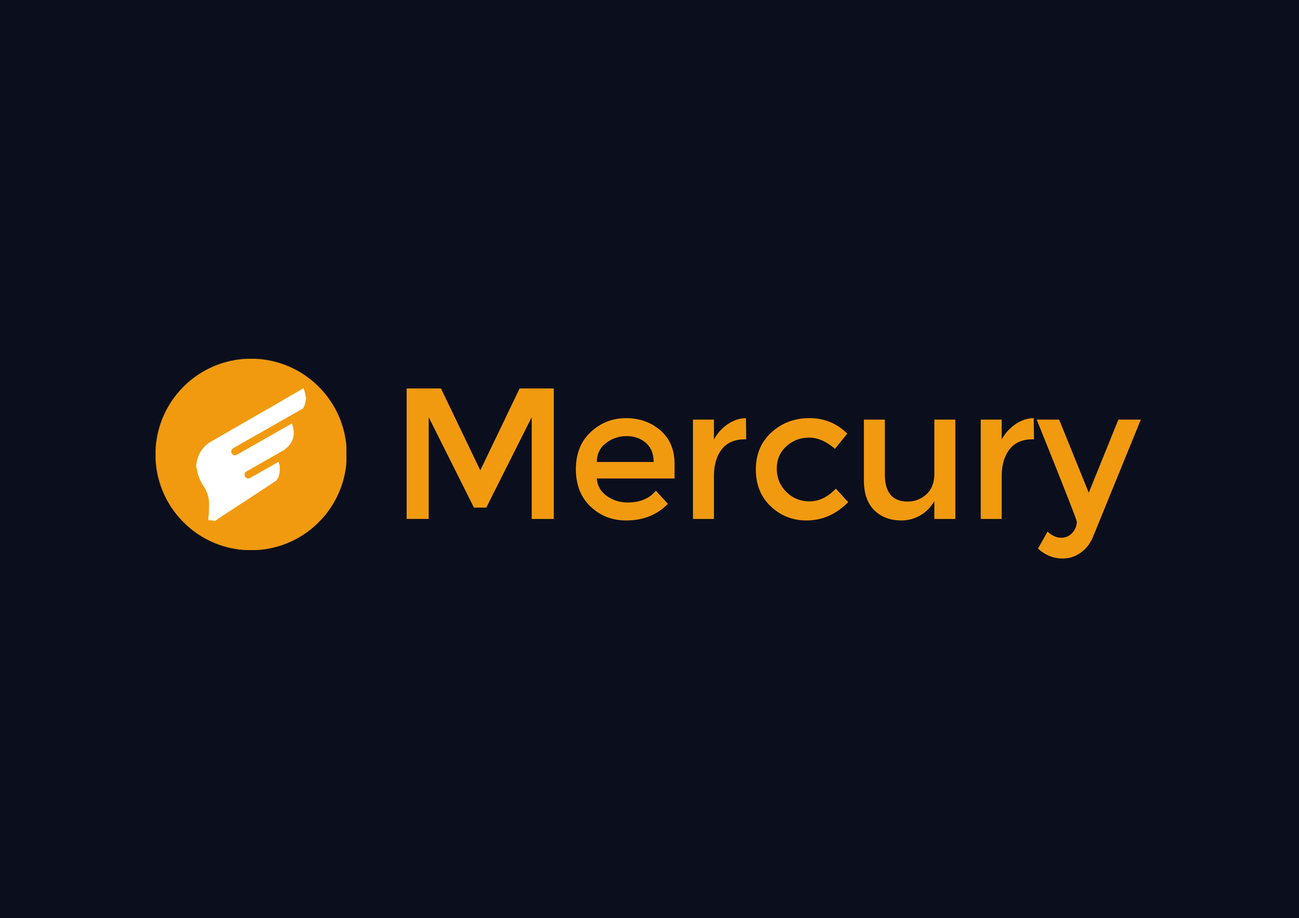
<style>
.page{position:relative;width:1299px;height:918px;background:#0b0f1d}
.page>*{position:absolute;margin:0}
.t1{font:186.7px "Montserrat-Regular";letter-spacing:-0.025em;color:#f19a0f}
</style>
<div class="page">
<p class="t1" style="left:407px;top:388px;width:733px;height:171px">Mercury</p>
</div>
